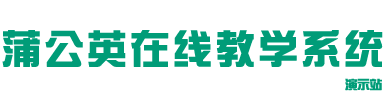
<style>
.page{position:relative;width:388px;height:100px;background:#ffffff}
.page>*{position:absolute;margin:0}
.t1{font:38px "SingYiEG-Ultra-GB";letter-spacing:0.1em;color:#009c78;font-weight:bold}
.t2{font:12px "SingYiEG-Ultra-GB";color:#009c78;font-weight:bold}
</style>
<div class="page">
<p class="t1" style="left:2px;top:30px;width:381px;height:37px">蒲公英在线教学系统</p>
<p class="t2" style="left:345px;top:78px;width:37px;height:13px">演示站</p>
</div>
